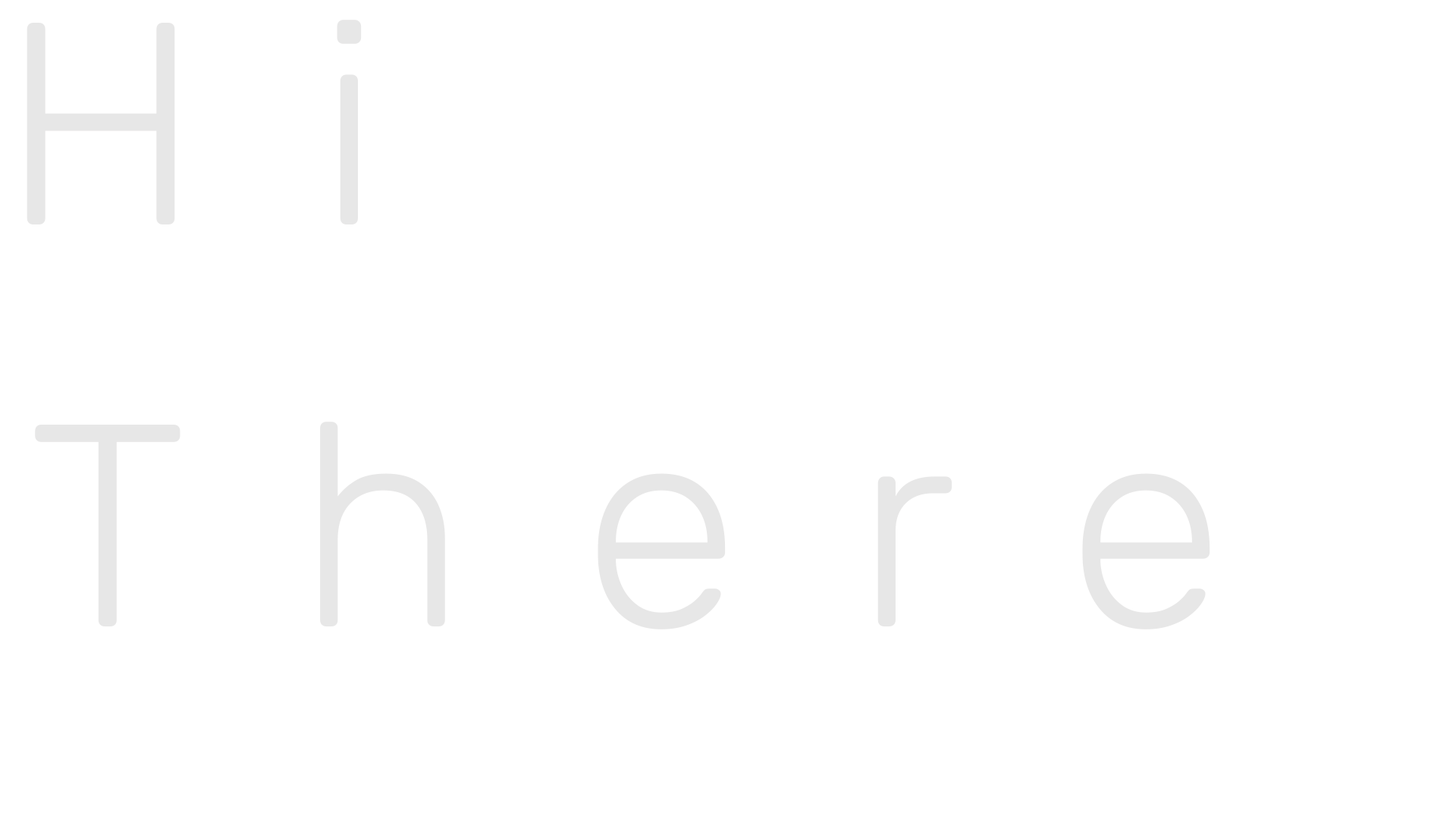
<style>
.page{position:relative;width:1456px;height:819px;background:#ffffff}
.page>*{position:absolute;margin:0}
.t1{font:288.2px "Rubik-Light";letter-spacing:0.4em;color:#e7e7e7}
</style>
<div class="page">
<p class="t1" style="left:27px;top:20px;width:335px;height:204px">Hi</p>
<p class="t1" style="left:35px;top:422px;width:1175px;height:207px">There</p>
</div>
